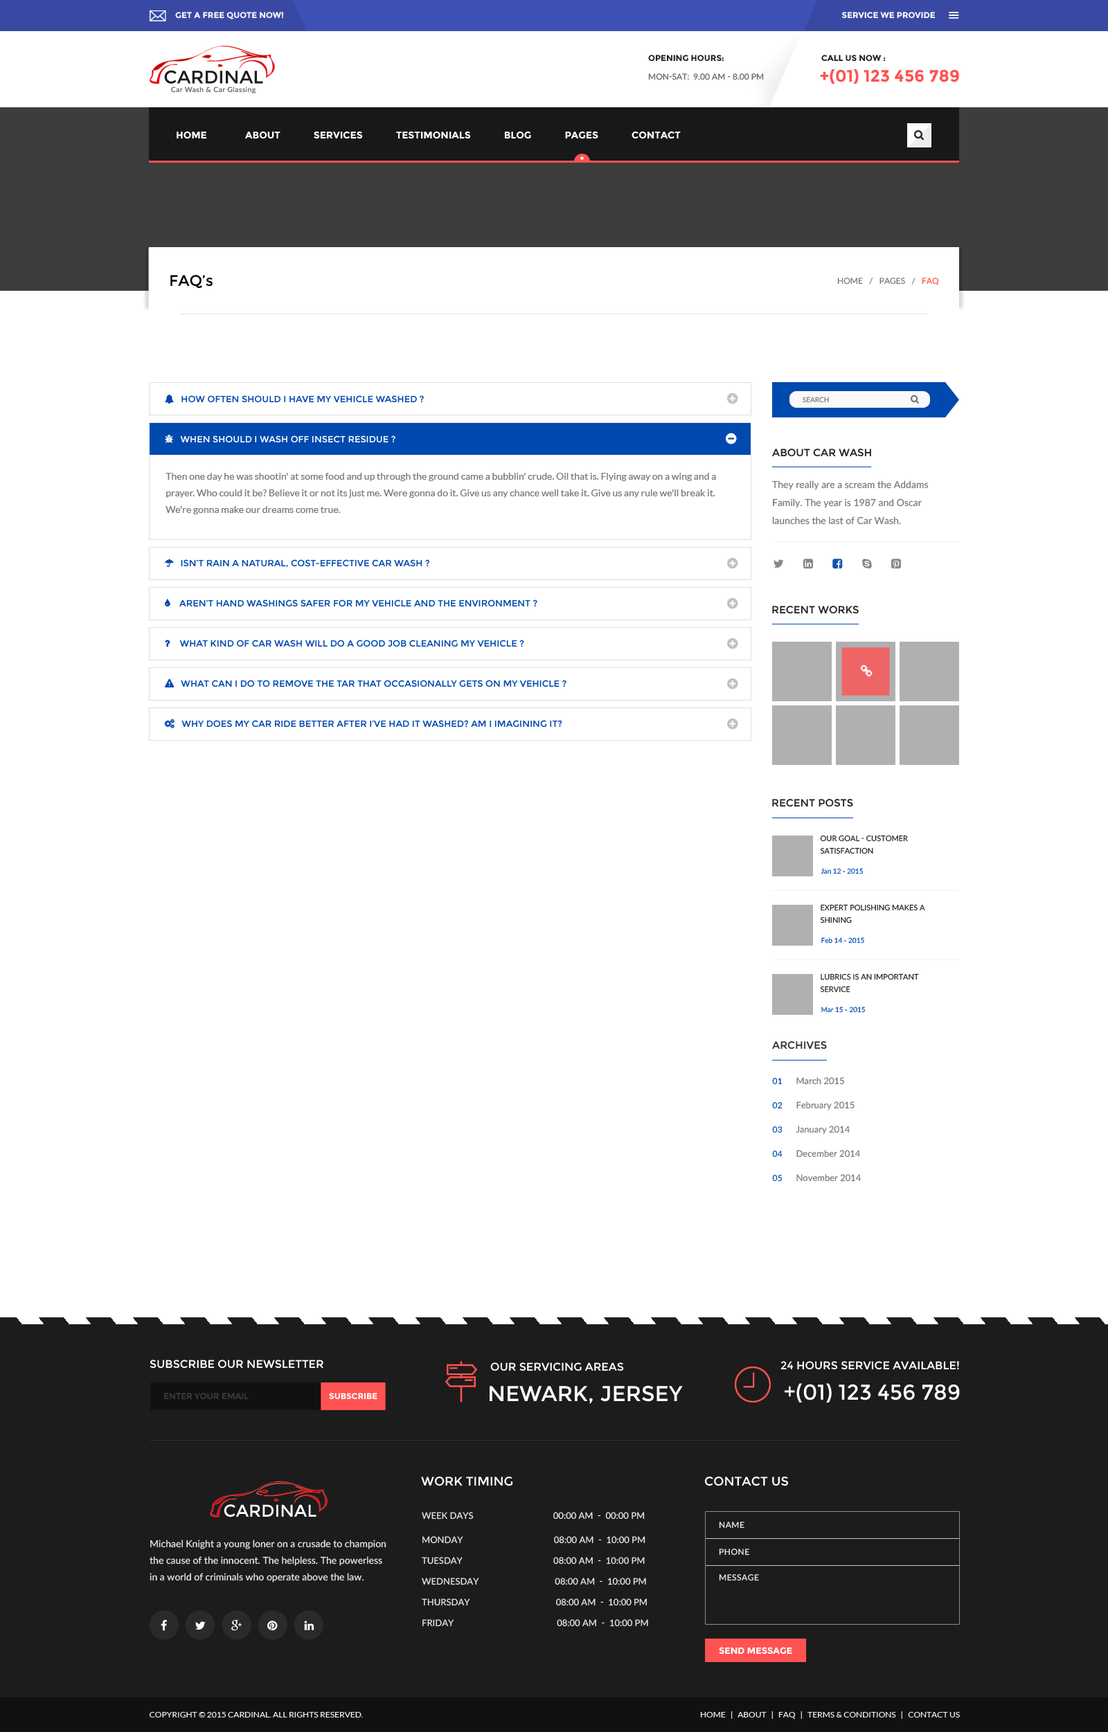
<style>
.page{position:relative;width:1108px;height:1732px;background:#ffffff}
.page>*{position:absolute;margin:0}
.t1{font:8.3px "Montserrat-Bold";color:#fbfbfb;text-transform:uppercase}
.t2{font:8.3px "Montserrat-Bold";color:#232323;text-transform:uppercase}
.t3{font:8.3px "Lato-Medium";color:#666666;text-transform:uppercase}
.t4{font:16.6px "Montserrat-Bold";color:#ff5252;text-transform:uppercase}
.t5{font:9.7px "Montserrat-Bold";color:#fffefe;text-transform:uppercase}
.t6{font:15.2px "Montserrat-Regular";color:#000000;text-transform:uppercase}
.t7{font:15.2px "Montserrat-Regular";color:#000000}
.t8{font:8.3px "Lato-Regular";color:#777777;text-transform:uppercase}
.t9{font:8.3px "Lato-Regular";color:#ff5252;text-transform:uppercase}
.t10{font:6.9px "Lato-Regular";color:#777777;text-transform:uppercase}
.t11{font:10.4px "Montserrat-Regular";color:#222222;text-transform:uppercase}
.t12{font:9.7px/16.6px "Lato-Regular";color:#777777}
.t13{font:9.7px/18px "Lato-Regular";color:#777777}
.t14{font:7.6px/12.5px "Lato-Regular";color:#222222;text-transform:uppercase}
.t15{font:6.9px "Lato-Regular";color:#0049af}
.t16{font:6.9px "Lato-Regular"}
.t17{font:10.4px "Montserrat-Regular";color:#313131;text-transform:uppercase}
.t18{font:8.3px/24.2px "Lato-Regular";letter-spacing:0.04em;color:#0049af}
.t19{font:9px/24.2px "Lato-Regular";color:#777777}
.t20{font:11.1px "Montserrat-Regular";color:#ffffff;text-transform:uppercase}
.t21{font:21.5px "Montserrat-Regular";color:#ffffff;text-transform:uppercase}
.t22{font:8.3px "Montserrat-Regular";color:#3f3f3f;text-transform:uppercase}
.t23{font:8.3px "Montserrat-Bold";color:#ffffff;text-transform:uppercase}
.t24{font:12.5px "Montserrat-Regular";color:#ffffff;text-transform:uppercase}
.t25{font:9px "Lato-Medium";color:#e8e8e8;text-transform:uppercase}
.t26{font:8.3px "Lato-Medium";letter-spacing:0.04em;color:#eeeeee;text-transform:uppercase}
.t27{font:9.7px/16.6px "Lato-Medium";color:#e8e8e8}
.t28{font:9px "Lato-Medium";color:#e8e8e8}
.t29{font:9px "Montserrat-Bold";color:#ffffff;text-transform:uppercase}
.t30{font:8.3px "Lato-Regular";color:#eeeeee;text-transform:uppercase}
</style>
<div class="page">
<p class="t1" style="left:842px;top:12px;width:93px;height:7px">service we provide</p>
<p class="t2" style="left:648px;top:55px;width:75px;height:7px">OPENING HOURS:</p>
<p class="t2" style="left:821px;top:55px;width:64px;height:7px">Call us now :</p>
<p class="t3" style="left:648px;top:73px;width:116px;height:7px">MON-SAT:  9.00 AM - 8.00 Pm</p>
<p class="t4" style="left:820px;top:69px;width:139px;height:15px">+(01) 123 456 789</p>
<p class="t5" style="left:177px;top:131px;width:504px;height:8px">Home             About             Services             Testimonials             Blog             pAGES             Contact</p>
<p class="t6" style="left:170px;top:275px;width:43px;height:13px">FAQ’<span class="t7">s</span></p>
<p class="t8" style="left:837px;top:278px;width:102px;height:7px">Home   /   Pages   /   <span class="t9">FAQ</span></p>
<p class="t10" style="left:802px;top:397px;width:27px;height:6px">Search</p>
<p class="t11" style="left:772px;top:449px;width:99px;height:8px">About Car Wash</p>
<p class="t12" style="left:165px;top:473px;width:551px;height:41px">Then one day he was shootin' at some food and up through the ground came a bubblin' crude. Oil that is. Flying away on a wing and a prayer. Who could it be? Believe it or not its just me. Were gonna do it. Give us any chance well take it. Give us any rule we'll break it. We're gonna make our dreams come true.</p>
<p class="t13" style="left:772px;top:480px;width:156px;height:45px">They really are a scream the Addams Family. The year is 1987 and Oscar launches the last of Car Wash.</p>
<p class="t11" style="left:772px;top:606px;width:86px;height:8px">Recent Works</p>
<p class="t11" style="left:772px;top:799px;width:81px;height:8px">Recent Posts</p>
<p class="t14" style="left:820px;top:835px;width:88px;height:19px">Our Goal - Customer Satisfaction</p>
<p class="t15" style="left:820px;top:868px;width:43px;height:6px">Jan 12 - 2015</p>
<p class="t14" style="left:820px;top:904px;width:105px;height:20px">Expert Polishing Makes a Shining</p>
<p class="t15" style="left:821px;top:937px;width:43px;height:7px">Feb 14 - 2015</p>
<p class="t14" style="left:820px;top:973px;width:99px;height:20px">Lubrics is An Important<br>Service</p>
<p class="t16" style="left:821px;top:1007px;width:44px;height:6px">Mar 15 - 2015</p>
<p class="t17" style="left:772px;top:1041px;width:55px;height:9px">Archives</p>
<p class="t18" style="left:772px;top:1078px;width:10px;height:104px">01<br>02<br>03<br>04<br>05</p>
<p class="t19" style="left:795px;top:1077px;width:66px;height:105px">March 2015<br>February 2015<br>January 2014<br>December 2014<br>November 2014</p>
<p class="t20" style="left:150px;top:1360px;width:173px;height:9px">subscribe our newsletter</p>
<p class="t20" style="left:780px;top:1361px;width:179px;height:9px">24 HOURS SERVICE AVAILABLE!</p>
<p class="t20" style="left:490px;top:1362px;width:134px;height:9px">OUR SERVICING AREAS</p>
<p class="t21" style="left:489px;top:1385px;width:194px;height:19px">Newark, Jersey</p>
<p class="t21" style="left:784px;top:1383px;width:176px;height:20px">+(01) 123 456 789</p>
<p class="t22" style="left:164px;top:1393px;width:85px;height:7px">enter your email</p>
<p class="t23" style="left:329px;top:1393px;width:48px;height:7px">Subscribe</p>
<p class="t24" style="left:421px;top:1476px;width:92px;height:10px">Work Timing</p>
<p class="t24" style="left:704px;top:1476px;width:85px;height:10px">contact us</p>
<p class="t25" style="left:422px;top:1512px;width:223px;height:8px">Week Days                                   00:00 am  -  00:00 pm</p>
<p class="t26" style="left:719px;top:1522px;width:25px;height:7px">Name</p>
<p class="t27" style="left:150px;top:1540px;width:236px;height:43px">Michael Knight a young loner on a crusade to champion the cause of the innocent. The helpless. The powerless in a world of criminals who operate above the law.</p>
<p class="t25" style="left:422px;top:1536px;width:223px;height:8px"><span class="t28">MONDAY                                     </span>08:00 am  -  10:00 pm</p>
<p class="t26" style="left:719px;top:1549px;width:30px;height:7px">Phone</p>
<p class="t25" style="left:422px;top:1557px;width:223px;height:8px"><span class="t28">TUESDAY                                     </span>08:00 am  -  10:00 pm</p>
<p class="t25" style="left:422px;top:1578px;width:224px;height:7px"><span class="t28">WEDNESDAY                               </span>08:00 am  -  10:00 pm</p>
<p class="t26" style="left:719px;top:1574px;width:40px;height:7px">Message</p>
<p class="t25" style="left:422px;top:1599px;width:225px;height:7px"><span class="t28">THURSDAY                                   </span>08:00 am  -  10:00 pm</p>
<p class="t25" style="left:422px;top:1619px;width:226px;height:8px"><span class="t28">FRIDAY                                          </span>08:00 am  -  10:00 pm</p>
<p class="t29" style="left:719px;top:1647px;width:73px;height:8px">Send message</p>
<p class="t30" style="left:149px;top:1712px;width:214px;height:6px">Copyright © 2015 CARDINAL. All Rights Reserved.</p>
<p class="t30" style="left:700px;top:1711px;width:260px;height:8px">Home   |   About   |   FAQ   |   Terms &amp; Conditions   |   Contact Us</p>
</div>
